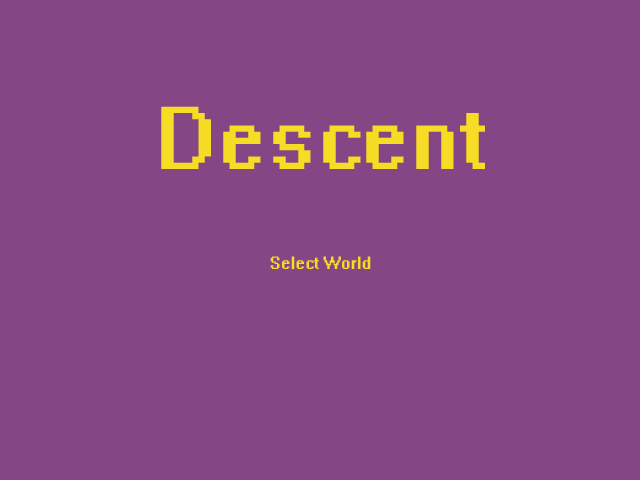
<style>
.page{position:relative;width:640px;height:480px;background:#844685}
.page>*{position:absolute;margin:0}
.t1{font:79.7px "System";color:#f7dc25}
.t2{font:15.7px "System";color:#f7dc25}
</style>
<div class="page">
<p class="t1" style="left:161px;top:106px;width:324px;height:63px">Descent</p>
<p class="t2" style="left:270px;top:256px;width:101px;height:13px">Select World</p>
</div>
